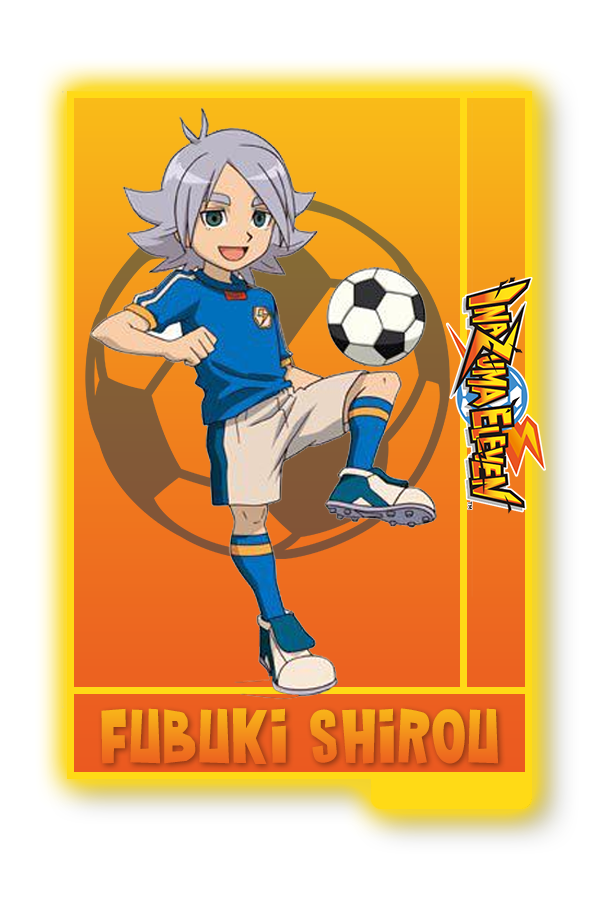
<style>
.page{position:relative;width:600px;height:900px;background:#ffffff}
.page>*{position:absolute;margin:0}
.t1{font:79.9px "TTG-Bold"}
</style>
<div class="page">
<p class="t1" style="left:101px;top:708px;width:397px;height:56px">Fubuki Shirou</p>
</div>
